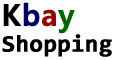
<style>
.page{position:relative;width:114px;height:60px;background:#ffffff}
.page>*{position:absolute;margin:0}
.t1{font:24px/30px "Consolas-Bold";color:#000000;font-weight:bold}
.t2{font:30px/30px "MalgunGothicBold";color:#000000;font-weight:bold}
.t3{font:30px/30px "MalgunGothicBold";color:#000066;font-weight:bold}
.t4{font:30px/30px "MalgunGothicBold";color:#990000;font-weight:bold}
.t5{font:30px/30px "MalgunGothicBold";color:#006600;font-weight:bold}
</style>
<div class="page">
<p class="t1" style="left:2px;top:2px;width:110px;height:55px"><span class="t2">K</span><span class="t3">b</span><span class="t4">a</span><span class="t5">y<br></span>Shopping</p>
</div>
